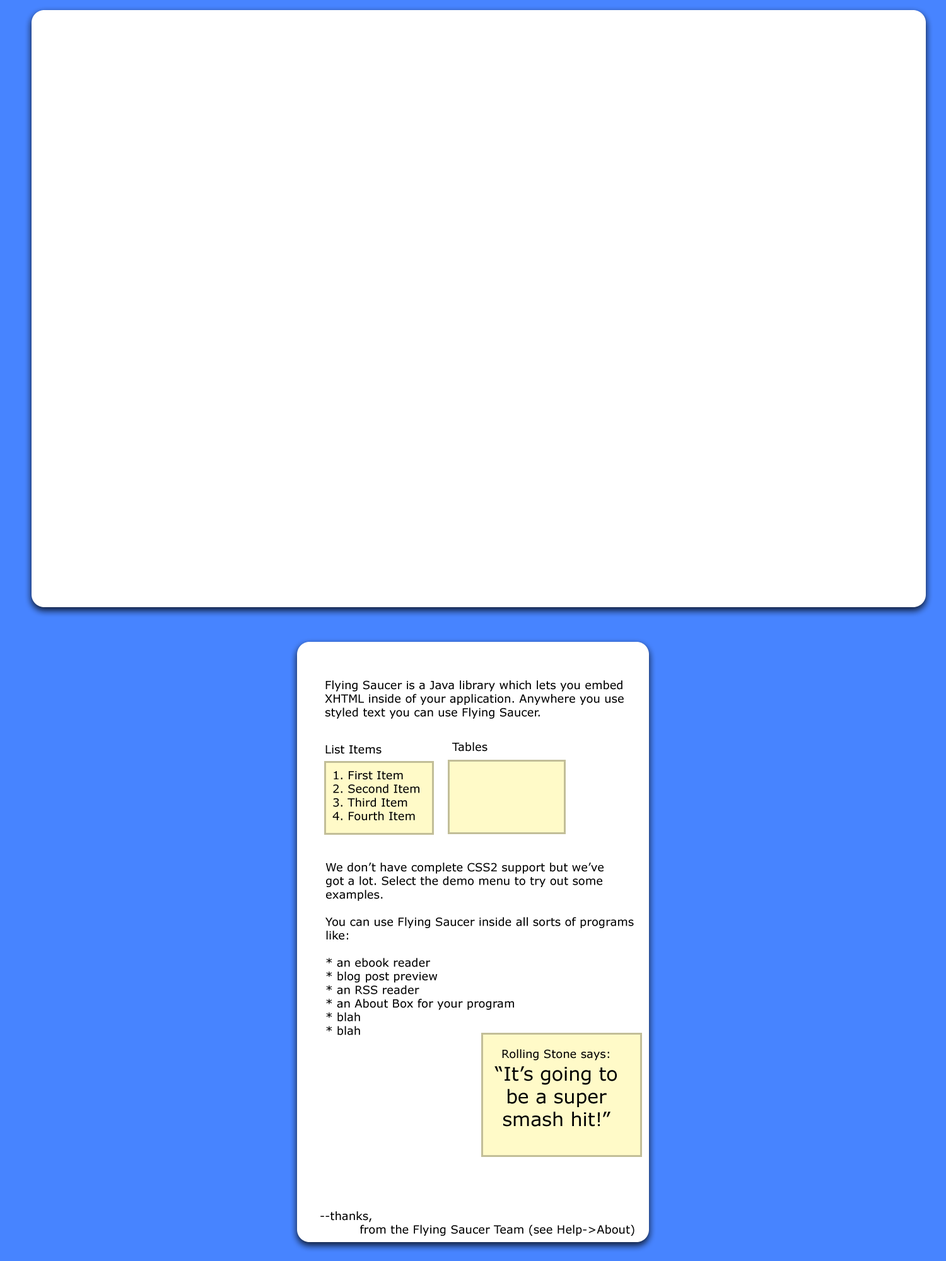
<style>
.page{position:relative;width:946px;height:1261px;background:#ffffff}
.page>*{position:absolute;margin:0}
.t1{font:11.3px "Verdana";color:#000000}
.t2{font:18.9px "Verdana";color:#000000}
</style>
<div class="page">
<p class="t1" style="left:325px;top:680px;width:299px;height:39px">Flying Saucer is a Java library which lets you embed<br>XHTML inside of your application. Anywhere you use<br>styled text you can use Flying Saucer.</p>
<p class="t1" style="left:325px;top:745px;width:56px;height:9px">List Items</p>
<p class="t1" style="left:452px;top:742px;width:35px;height:10px">Tables</p>
<p class="t1" style="left:332px;top:771px;width:87px;height:49px">1. First Item<br>2. Second Item<br>3. Third Item<br>4. Fourth Item</p>
<p class="t1" style="left:325px;top:862px;width:309px;height:173px">We don’t have complete CSS2 support but we’ve<br>got a lot. Select the demo menu to try out some<br>examples.<br><br>You can use Flying Saucer inside all sorts of programs<br>like:<br><br>* an ebook reader<br>* blog post preview<br>* an RSS reader<br>* an About Box for your program<br>* blah<br>* blah</p>
<p class="t2" style="left:494px;top:1049px;width:123px;height:78px;text-align:center"><span class="t1">Rolling Stone says:<br></span>“It’s going to <br>be a super <br>smash hit!”</p>
<p class="t1" style="left:320px;top:1211px;width:314px;height:25px">--thanks, <br>          from the Flying Saucer Team (see Help-&gt;About)</p>
</div>
